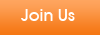
<style>
.page{position:relative;width:100px;height:35px}
.page>*{position:absolute;margin:0}
.t1{font:16px "AvantGardeLT-Medium";color:#ffffff}
</style>
<div class="page">
<p class="t1" style="left:21px;top:9px;width:54px;height:12px">Join Us</p>
</div>
